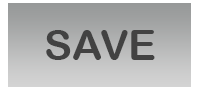
<style>
.page{position:relative;width:200px;height:90px}
.page>*{position:absolute;margin:0}
.t1{font:41.7px "ArialRoundedMTBold";color:#424242}
</style>
<div class="page">
<p class="t1" style="left:46px;top:30px;width:109px;height:30px">SAVE</p>
</div>
